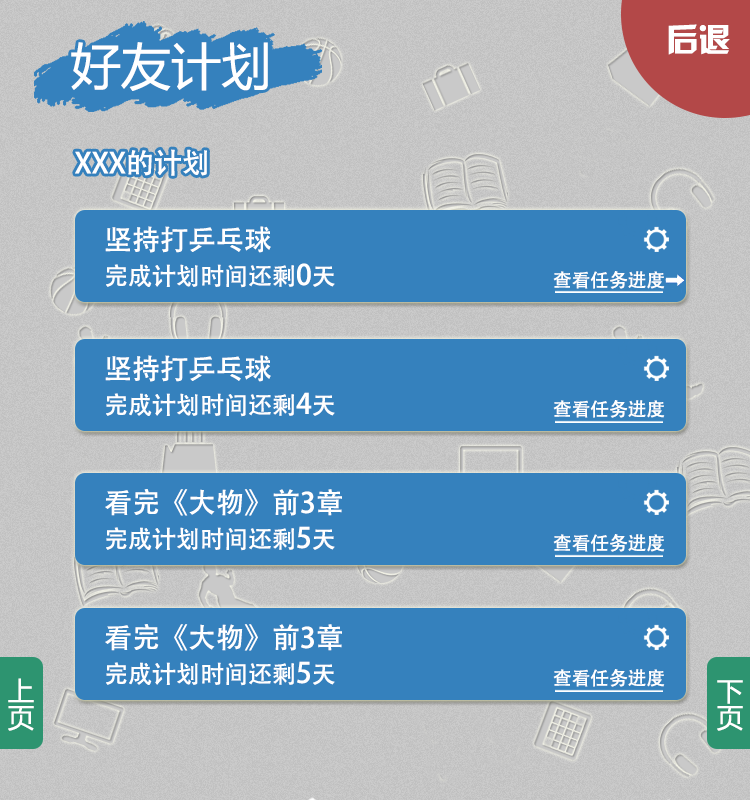
<style>
.page{position:relative;width:750px;height:800px;background:#3581bd}
.page>*{position:absolute;margin:0}
.t1{font:50.2px "MicrosoftYaHei";color:#ffffff}
.t2{font:28px "AdobeHeitiStd-Regular";color:#ffffff}
.t3{font:24px "AdobeHeitiStd-Regular";color:#ffffff}
.t4{font:18.7px "AdobeHeitiStd-Regular";color:#ffffff}
.t5{font:26.7px "MicrosoftYaHei";color:#ffffff}
</style>
<div class="page">
<p class="t1" style="left:71px;top:42px;width:197px;height:49px">好友计划</p>
<p class="t2" style="left:75px;top:149px;width:132px;height:27px">XXX的计划</p>
<p class="t2" style="left:105px;top:226px;width:166px;height:27px">坚持打乒乓球</p>
<p class="t3" style="left:106px;top:263px;width:229px;height:25px">完成计划时间还剩<span class="t2">0</span>天</p>
<p class="t4" style="left:553px;top:271px;width:130px;height:18px">查看任务进度→</p>
<p class="t2" style="left:105px;top:355px;width:166px;height:27px">坚持打乒乓球</p>
<p class="t3" style="left:106px;top:392px;width:229px;height:25px">完成计划时间还剩<span class="t2">4</span>天</p>
<p class="t4" style="left:553px;top:400px;width:112px;height:18px">查看任务进度</p>
<p class="t2" style="left:105px;top:489px;width:237px;height:27px">看完《大物》前3章</p>
<p class="t3" style="left:106px;top:526px;width:229px;height:25px">完成计划时间还剩<span class="t2">5</span>天</p>
<p class="t4" style="left:553px;top:534px;width:112px;height:18px">查看任务进度</p>
<p class="t2" style="left:105px;top:624px;width:237px;height:27px">看完《大物》前3章</p>
<p class="t3" style="left:106px;top:661px;width:229px;height:25px">完成计划时间还剩<span class="t2">5</span>天</p>
<p class="t5" style="left:8px;top:678px;width:26px;height:53px">上页</p>
<p class="t4" style="left:553px;top:669px;width:112px;height:18px">查看任务进度</p>
<p class="t5" style="left:717px;top:680px;width:26px;height:51px">下页</p>
</div>
